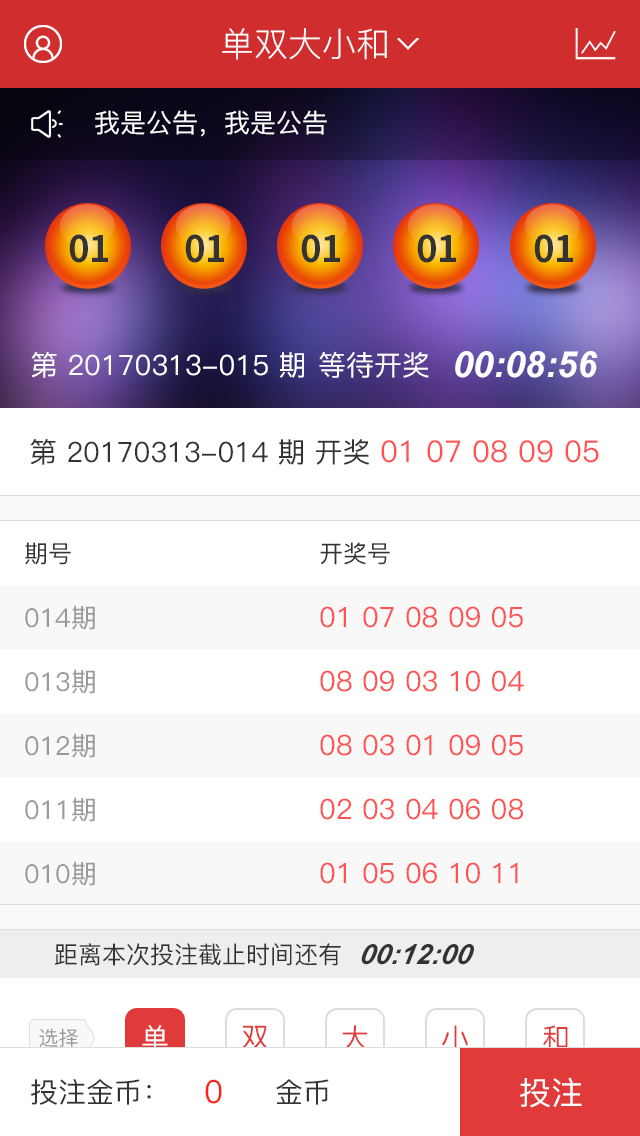
<style>
.page{position:relative;width:640px;height:1136px;background:#ffffff}
.page>*{position:absolute;margin:0}
.t1{font:34px "PingFang-SC-Regular";color:#ffffff}
.t2{font:26px "PingFang-SC-Medium";color:#ffffff}
.t3{font:36.4px "SourceHanSansCN-Bold";color:#333333}
.t4{font:28px "PingFang-SC-Medium";color:#ffffff}
.t5{font:36px "Arial-BoldItalicMT";color:#ffffff}
.t6{font:28px "PingFang-SC-Medium";color:#333333}
.t7{font:30px "PingFang-SC-Medium";color:#ff5252}
.t8{font:24px "PingFang-SC-Medium";color:#333333}
.t9{font:26px "PingFang-SC-Medium";color:#999999}
.t10{font:28px "PingFang-SC-Medium";color:#ff5252}
.t11{font:28px "Arial-BoldItalicMT";color:#333333;font-style:italic}
.t12{font:28px "PingFang-SC-Medium";color:#fffefe}
.t13{font:28px "PingFang-SC-Medium";color:#e03a3a}
.t14{font:20px "PingFang-SC-Medium";color:#999999}
.t15{font:32px "PingFang-SC-Medium";color:#ff1f1f}
.t16{font:32px "PingFang-SC-Medium";color:#ffffff}
</style>
<div class="page">
<p class="t1" style="left:222px;top:28px;width:165px;height:32px">单双大小和</p>
<p class="t2" style="left:95px;top:110px;width:232px;height:27px">我是公告，我是公告</p>
<p class="t3" style="left:69px;top:234px;width:39px;height:29px">01</p>
<p class="t3" style="left:185px;top:234px;width:39px;height:29px">01</p>
<p class="t3" style="left:301px;top:234px;width:39px;height:29px">01</p>
<p class="t3" style="left:417px;top:234px;width:39px;height:29px">01</p>
<p class="t3" style="left:534px;top:234px;width:39px;height:29px">01</p>
<p class="t4" style="left:31px;top:351px;width:398px;height:27px">第 20170313-015 期 等待开奖</p>
<p class="t5" style="left:455px;top:351px;width:143px;height:27px">00:08:56</p>
<p class="t6" style="left:30px;top:439px;width:569px;height:26px">第 20170313-014 期 开奖 <span class="t7">01 07 08 09 05</span></p>
<p class="t8" style="left:25px;top:542px;width:46px;height:23px">期号</p>
<p class="t8" style="left:320px;top:542px;width:70px;height:23px">开奖号</p>
<p class="t9" style="left:25px;top:605px;width:70px;height:25px">014期</p>
<p class="t10" style="left:320px;top:606px;width:203px;height:22px">01 07 08 09 05</p>
<p class="t9" style="left:25px;top:669px;width:70px;height:25px">013期</p>
<p class="t10" style="left:320px;top:670px;width:204px;height:22px">08 09 03 10 04</p>
<p class="t9" style="left:25px;top:733px;width:70px;height:25px">012期</p>
<p class="t10" style="left:320px;top:734px;width:203px;height:22px">08 03 01 09 05</p>
<p class="t9" style="left:25px;top:797px;width:70px;height:25px">011期</p>
<p class="t10" style="left:320px;top:798px;width:203px;height:22px">02 03 04 06 08</p>
<p class="t9" style="left:25px;top:861px;width:70px;height:25px">010期</p>
<p class="t10" style="left:320px;top:862px;width:198px;height:22px">01 05 06 10 11</p>
<p class="t8" style="left:55px;top:943px;width:286px;height:23px">距离本次投注截止时间还有</p>
<p class="t11" style="left:361px;top:944px;width:113px;height:21px">00:12:00</p>
<p class="t12" style="left:142px;top:1025px;width:26px;height:26px">单</p>
<p class="t13" style="left:242px;top:1025px;width:26px;height:25px">双</p>
<p class="t13" style="left:342px;top:1025px;width:26px;height:26px">大</p>
<p class="t13" style="left:442px;top:1025px;width:26px;height:26px">小</p>
<p class="t13" style="left:543px;top:1025px;width:25px;height:26px">和</p>
<p class="t14" style="left:39px;top:1028px;width:39px;height:19px">选择</p>
<p class="t6" style="left:31px;top:1079px;width:120px;height:26px">投注金币：</p>
<p class="t15" style="left:205px;top:1079px;width:17px;height:25px">0</p>
<p class="t6" style="left:276px;top:1079px;width:53px;height:26px">金币</p>
<p class="t16" style="left:520px;top:1077px;width:62px;height:31px">投注</p>
</div>
